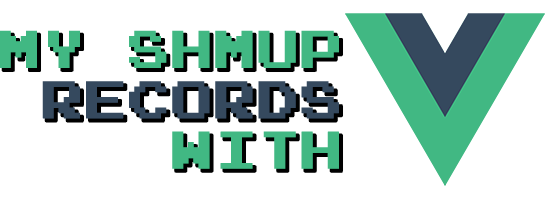
<style>
.page{position:relative;width:545px;height:200px;background:#ffffff}
.page>*{position:absolute;margin:0}
.t1{font:42px "PressStart2P";color:#41b883;font-weight:bold}
.t2{font:42px "PressStart2P";color:#35495e;font-weight:bold}
</style>
<div class="page">
<p class="t1" style="left:0px;top:30px;width:339px;height:139px;text-align:right">MY SHMUP<br><span class="t2">RECORDS<br></span>WITH</p>
</div>
